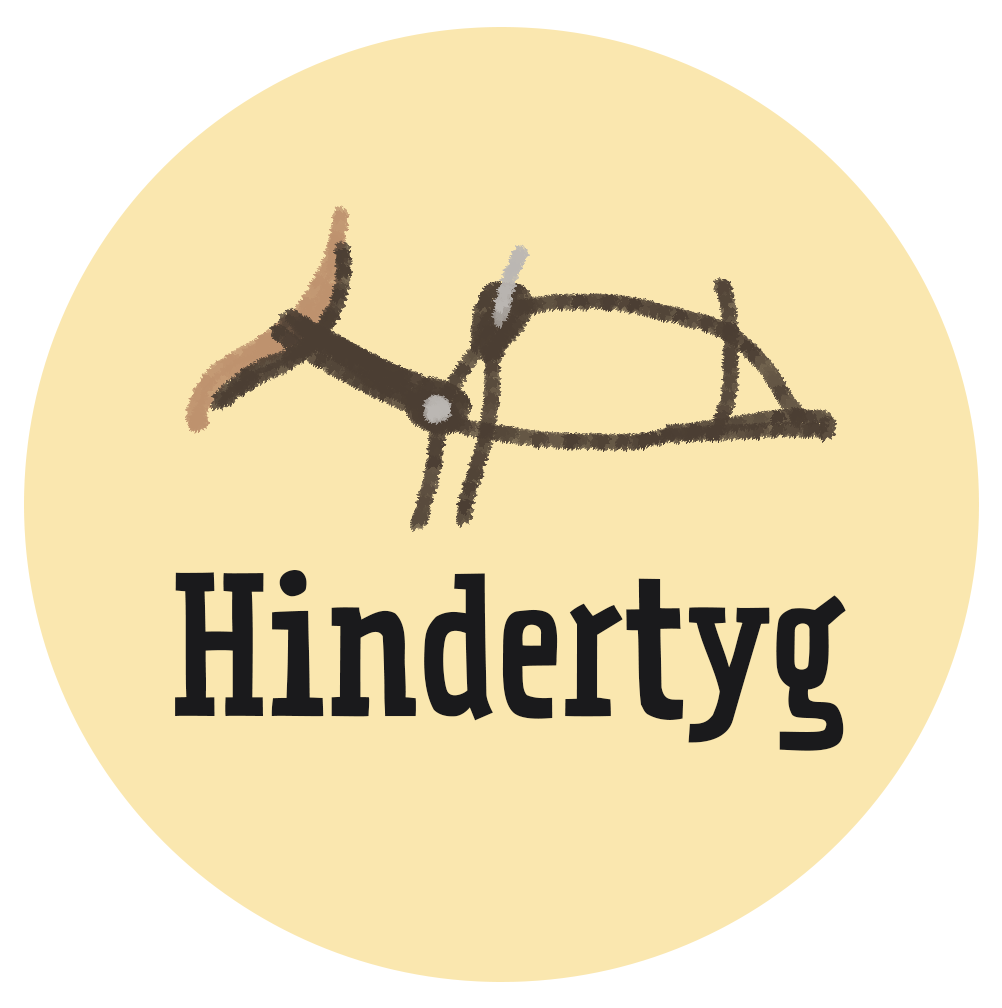
<style>
.page{position:relative;width:1002px;height:1008px;background:#fae7af}
.page>*{position:absolute;margin:0}
.t1{font:180px "PraterSerifPro";color:#1a1a1c}
</style>
<div class="page">
<p class="t1" style="left:175px;top:570px;width:671px;height:181px">Hindertyg</p>
</div>
